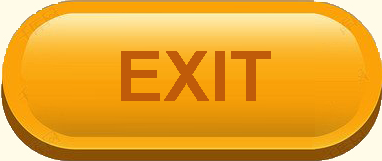
<style>
.page{position:relative;width:382px;height:161px}
.page>*{position:absolute;margin:0}
.t1{font:70px "Arial-BoldMT";color:#c05b09}
</style>
<div class="page">
<p class="t1" style="left:121px;top:51px;width:150px;height:50px">EXIT</p>
</div>
